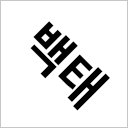
<style>
.page{position:relative;width:128px;height:128px;background:#ffffff}
.page>*{position:absolute;margin:0}
.t1{font:50px "NotoSansCJKkr-Bold";letter-spacing:-0.025em;color:#000000}
</style>
<div class="page">
<p class="t1" style="left:30px;top:21px;width:80px;height:90px;rotate:45deg">백태</p>
</div>
